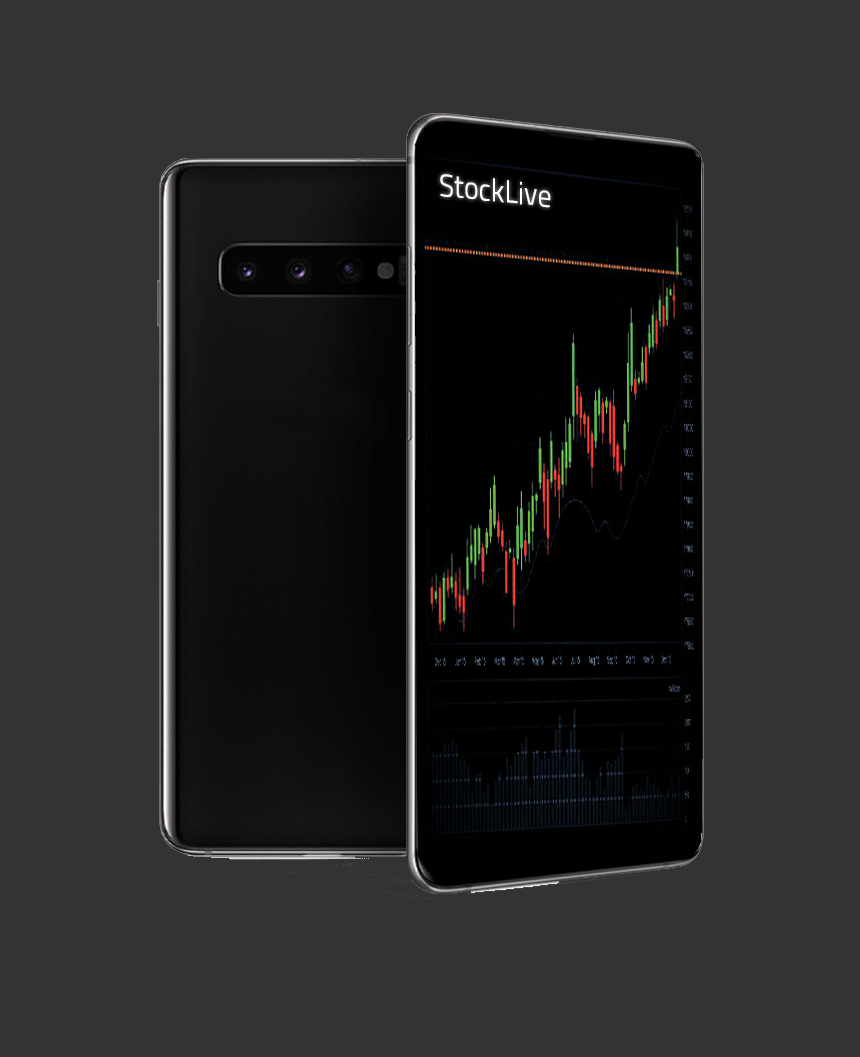
<style>
.page{position:relative;width:860px;height:1057px;background:#333333}
.page>*{position:absolute;margin:0}
.t1{font:32px "TitilliumWeb-Regular";color:#ffffff;scale:0.88 1}
</style>
<div class="page">
<p class="t1" style="left:440px;top:174px;width:111px;height:34px;rotate:6deg">StockLive</p>
</div>
